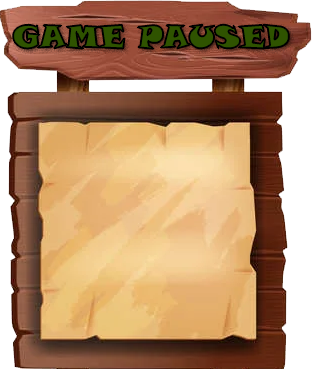
<style>
.page{position:relative;width:312px;height:369px}
.page>*{position:absolute;margin:0}
.t1{font:31px "SnapITC-Regular";color:#2f5300}
</style>
<div class="page">
<p class="t1" style="left:13px;top:24px;width:276px;height:25px">GAME PAUSED</p>
</div>
